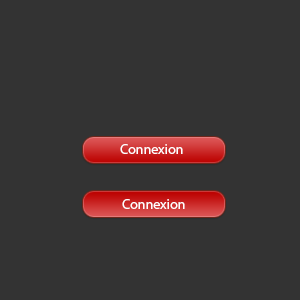
<style>
.page{position:relative;width:300px;height:300px;background:#333333}
.page>*{position:absolute;margin:0}
.t1{font:14px "MyriadPro-Regular";color:#ffffff}
</style>
<div class="page">
<p class="t1" style="left:120px;top:144px;width:63px;height:10px">Connexion</p>
<p class="t1" style="left:122px;top:199px;width:63px;height:10px">Connexion</p>
</div>
